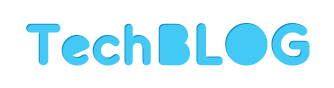
<style>
.page{position:relative;width:334px;height:88px;background:#ffffff}
.page>*{position:absolute;margin:0}
.t1{font:62px "Zitti";color:#43c9f6}
</style>
<div class="page">
<p class="t1" style="left:26px;top:23px;width:284px;height:43px">TechBLOG</p>
</div>
